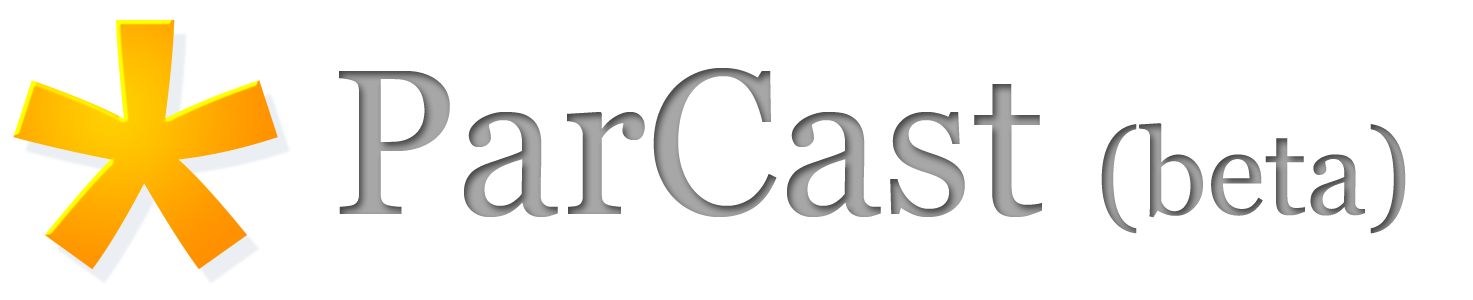
<style>
.page{position:relative;width:1473px;height:300px;background:#ffffff}
.page>*{position:absolute;margin:0}
.t1{font:818.2px "ArialMT"}
.t2{font:207.3px "Georgia"}
.t3{font:120px "Georgia"}
</style>
<div class="page">
<p class="t1" style="left:13px;top:20px;width:265px;height:249px">*</p>
<p class="t2" style="left:339px;top:68px;width:1067px;height:166px">ParCast <span class="t3">(beta)</span></p>
</div>
